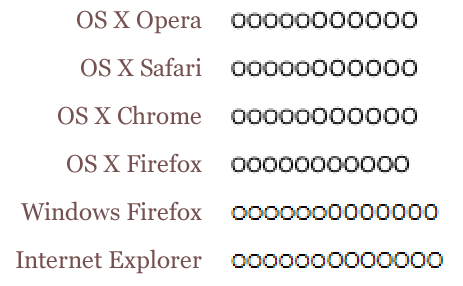
<style>
.page{position:relative;width:463px;height:286px;background:#ffffff}
.page>*{position:absolute;margin:0}
.t1{font:24px/48px "Georgia";color:#765151}
</style>
<div class="page">
<p class="t1" style="left:16px;top:10px;width:186px;height:264px;text-align:right">OS X Opera<br>OS X Safari<br>OS X Chrome<br>OS X Firefox<br>Windows Firefox<br>Internet Explorer</p>
</div>
